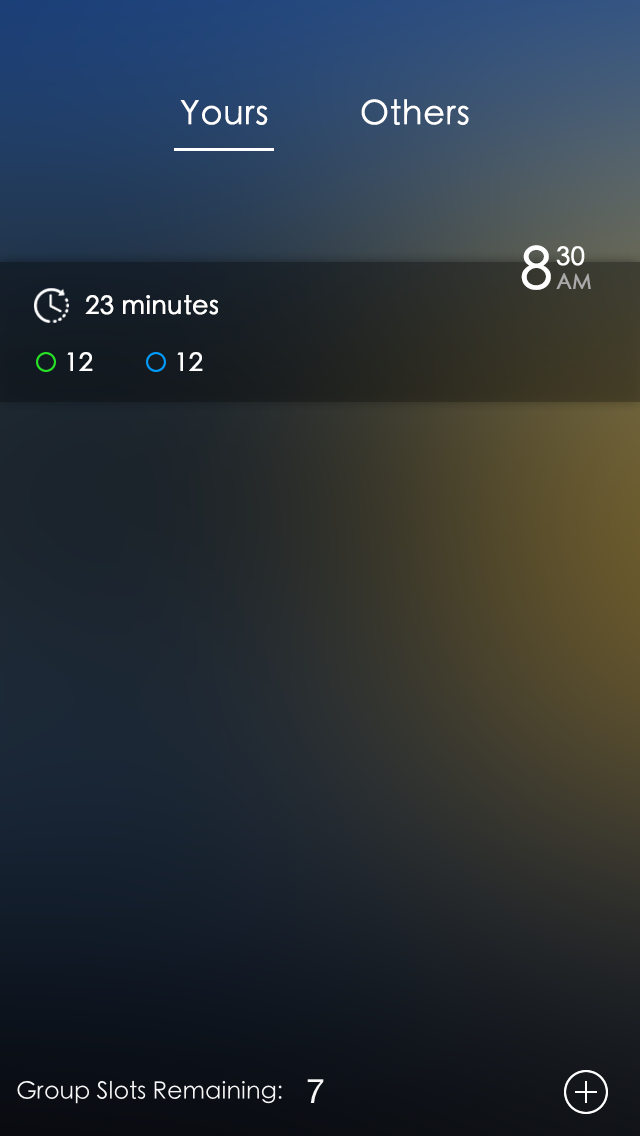
<style>
.page{position:relative;width:640px;height:1136px}
.page>*{position:absolute;margin:0}
.t1{font:33.3px "STHeitiSC-Light";color:#ffffff;font-weight:bold}
.t2{font:58.3px "STHeitiSC-Light";color:#ffffff;font-weight:bold}
.t3{font:25px "STHeitiSC-Light";color:#ffffff;font-weight:bold}
.t4{font:20.8px "STHeitiSC-Light";color:#aaaaaa;font-weight:bold}
</style>
<div class="page">
<p class="t1" style="left:180px;top:100px;width:88px;height:25px">Yours</p>
<p class="t1" style="left:361px;top:99px;width:108px;height:26px">Others</p>
<p class="t2" style="left:521px;top:245px;width:30px;height:45px">8</p>
<p class="t3" style="left:556px;top:246px;width:29px;height:20px">30</p>
<p class="t4" style="left:556px;top:273px;width:35px;height:16px">AM</p>
<p class="t3" style="left:85px;top:295px;width:133px;height:20px">23 minutes</p>
<p class="t3" style="left:67px;top:352px;width:26px;height:19px">12</p>
<p class="t3" style="left:177px;top:352px;width:26px;height:19px">12</p>
</div>
